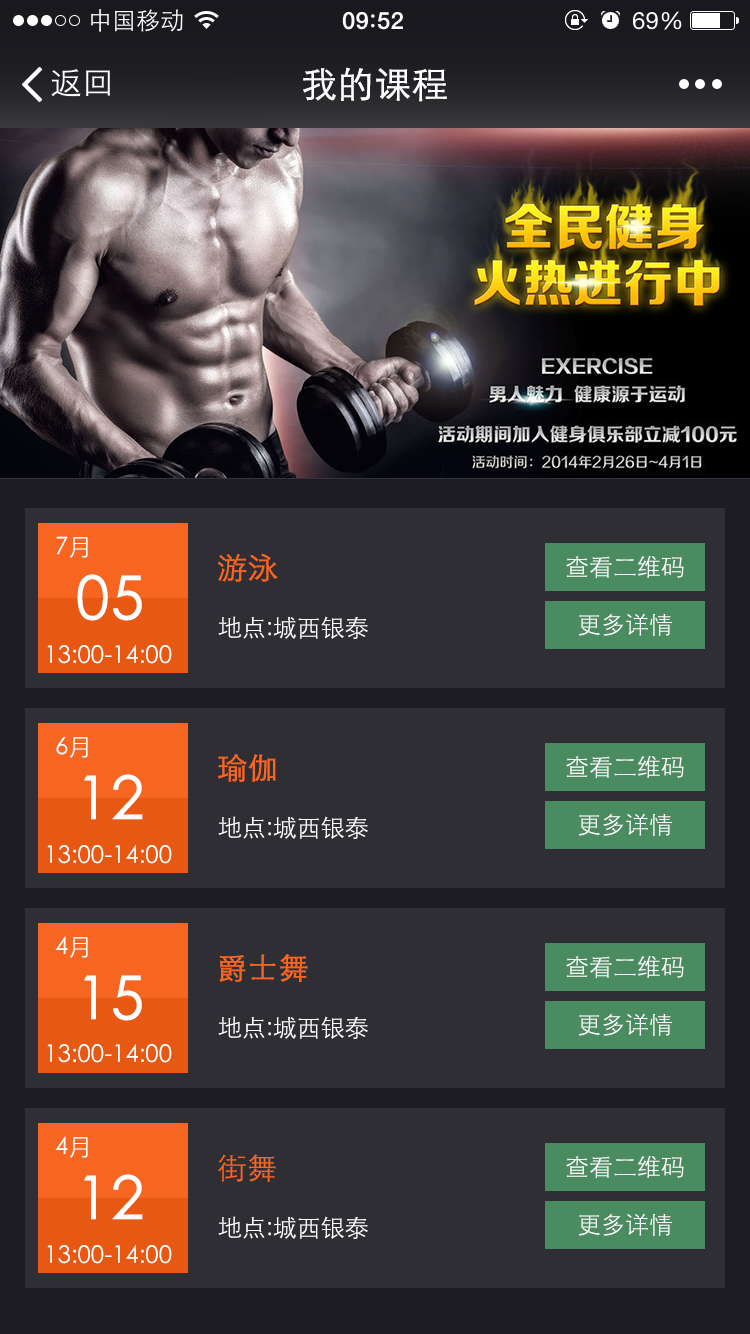
<style>
.page{position:relative;width:750px;height:1334px;background:#2f2e34}
.page>*{position:absolute;margin:0}
.t1{font:36px "STXihei";color:#ffffff;font-weight:bold}
.t2{font:24px "STXihei";color:#ffffff}
.t3{font:30px "STXihei";color:#f66620;font-weight:bold}
.t4{font:60px "STXihei";color:#ffffff;font-weight:bold}
.t5{font:30px "STXihei";color:#f66620}
</style>
<div class="page">
<p class="t1" style="left:303px;top:67px;width:144px;height:35px">我的课程</p>
<p class="t2" style="left:56px;top:536px;width:32px;height:22px">7月</p>
<p class="t3" style="left:218px;top:553px;width:60px;height:29px">游泳</p>
<p class="t2" style="left:566px;top:555px;width:118px;height:23px">查看二维码</p>
<p class="t4" style="left:77px;top:574px;width:65px;height:47px">05</p>
<p class="t2" style="left:218px;top:616px;width:150px;height:23px">地点:城西银泰</p>
<p class="t2" style="left:578px;top:613px;width:94px;height:23px">更多详情</p>
<p class="t2" style="left:47px;top:645px;width:125px;height:19px">13:00-14:00</p>
<p class="t2" style="left:56px;top:736px;width:32px;height:22px">6月</p>
<p class="t3" style="left:218px;top:753px;width:58px;height:29px">瑜伽</p>
<p class="t2" style="left:566px;top:755px;width:118px;height:23px">查看二维码</p>
<p class="t4" style="left:84px;top:774px;width:59px;height:46px">12</p>
<p class="t2" style="left:218px;top:816px;width:150px;height:23px">地点:城西银泰</p>
<p class="t2" style="left:578px;top:813px;width:94px;height:23px">更多详情</p>
<p class="t2" style="left:47px;top:845px;width:125px;height:19px">13:00-14:00</p>
<p class="t2" style="left:55px;top:936px;width:33px;height:22px">4月</p>
<p class="t3" style="left:219px;top:954px;width:89px;height:28px">爵士舞</p>
<p class="t2" style="left:566px;top:955px;width:118px;height:23px">查看二维码</p>
<p class="t4" style="left:84px;top:975px;width:58px;height:46px">15</p>
<p class="t2" style="left:578px;top:1013px;width:94px;height:23px">更多详情</p>
<p class="t2" style="left:218px;top:1016px;width:150px;height:23px">地点:城西银泰</p>
<p class="t2" style="left:47px;top:1044px;width:125px;height:19px">13:00-14:00</p>
<p class="t2" style="left:55px;top:1136px;width:33px;height:22px">4月</p>
<p class="t5" style="left:218px;top:1154px;width:58px;height:28px">街舞</p>
<p class="t2" style="left:566px;top:1155px;width:118px;height:23px">查看二维码</p>
<p class="t4" style="left:84px;top:1174px;width:59px;height:46px">12</p>
<p class="t2" style="left:218px;top:1216px;width:150px;height:23px">地点:城西银泰</p>
<p class="t2" style="left:578px;top:1213px;width:94px;height:23px">更多详情</p>
<p class="t2" style="left:47px;top:1245px;width:125px;height:19px">13:00-14:00</p>
</div>
